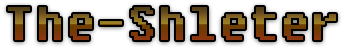
<style>
.page{position:relative;width:345px;height:50px;background:#ffffff}
.page>*{position:absolute;margin:0}
.t1{font:60px "DungGeunMo";letter-spacing:0.01em}
</style>
<div class="page">
<p class="t1" style="left:8px;top:7px;width:328px;height:33px">The-Shleter</p>
</div>
